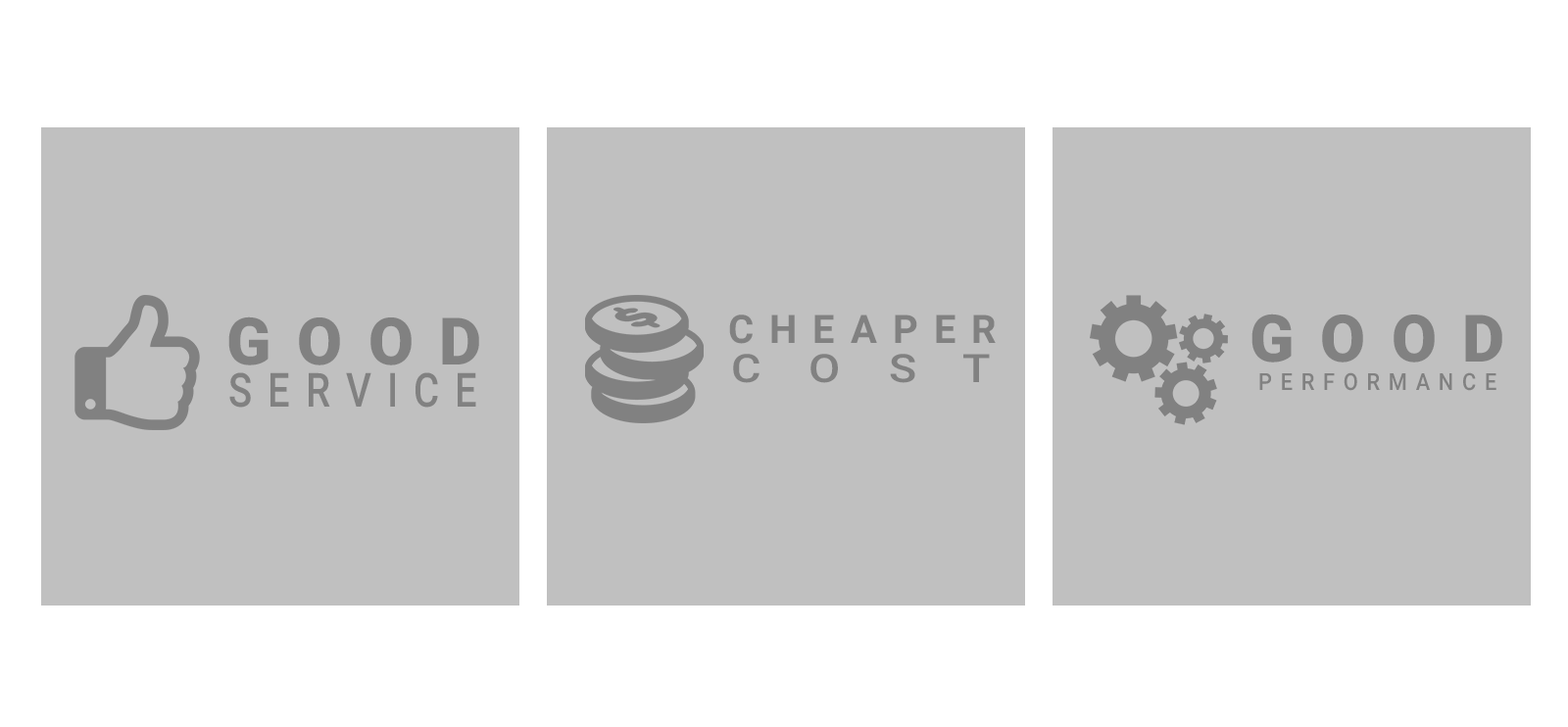
<style>
.page{position:relative;width:1568px;height:727px;background:#c0c0c0}
.page>*{position:absolute;margin:0}
.t1{font:65.3px "Roboto-Black";letter-spacing:0.4em;color:#818181}
.t2{font:39.2px "Roboto-Bold";letter-spacing:0.4em;color:#818181}
.t3{font:39.1px "Roboto-Medium";letter-spacing:0.4em;color:#818181;scale:1.17 1}
.t4{font:47px "Roboto-Medium";letter-spacing:0.4em;color:#818181;scale:0.84 1}
.t5{font:23.5px "Roboto-Medium";letter-spacing:0.4em;color:#818181;scale:0.91 1}
</style>
<div class="page">
<p class="t1" style="left:228px;top:317px;width:251px;height:49px">GOOD</p>
<p class="t2" style="left:729px;top:315px;width:267px;height:29px">CHEAPER</p>
<p class="t1" style="left:1251px;top:314px;width:251px;height:49px">GOOD</p>
<p class="t3" style="left:733px;top:354px;width:257px;height:29px">C O S T</p>
<p class="t4" style="left:229px;top:372px;width:247px;height:36px">SERVICE</p>
<p class="t5" style="left:1259px;top:372px;width:237px;height:19px">PERFORMANCE</p>
</div>
